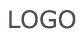
<style>
.page{position:relative;width:84px;height:38px;background:#ffffff}
.page>*{position:absolute;margin:0}
.t1{font:24px "Verdana";letter-spacing:0.001em;color:#534d4d}
</style>
<div class="page">
<p class="t1" style="left:9px;top:10px;width:67px;height:19px">LOGO</p>
</div>
